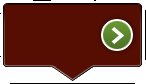
<style>
.page{position:relative;width:146px;height:84px;background:#560e02}
.page>*{position:absolute;margin:0}
.t1{font:30px "Consolas-Bold";color:#ffffff}
</style>
<div class="page">
<p class="t1" style="left:111px;top:27px;width:13px;height:17px">&gt;</p>
</div>
